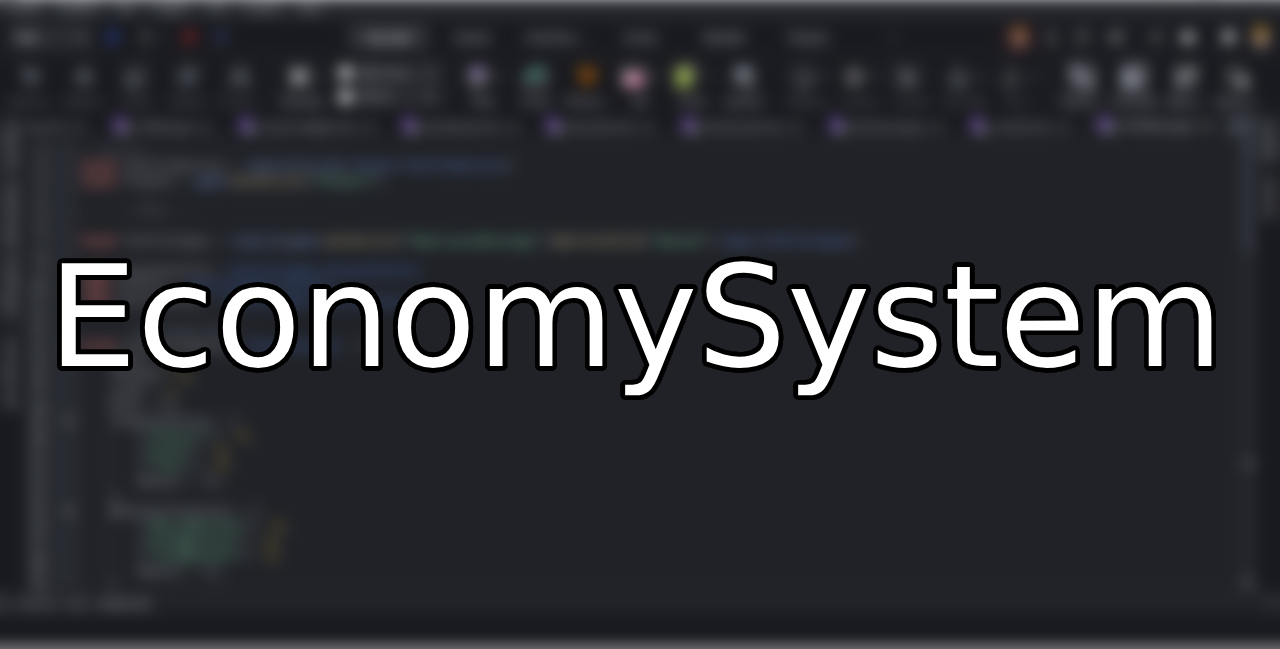
<style>
.page{position:relative;width:1280px;height:649px;background:#202227}
.page>*{position:absolute;margin:0}
.t1{font:141px "DejaVuSans";color:#ffffff}
</style>
<div class="page">
<p class="t1" style="left:61px;top:261px;width:1151px;height:135px">EconomySystem</p>
</div>
